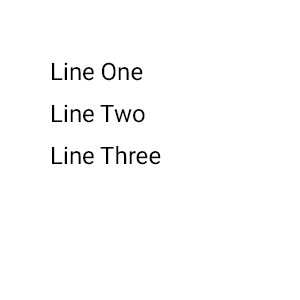
<style>
.page{position:relative;width:300px;height:300px;background:#ffffff}
.page>*{position:absolute;margin:0}
.t1{font:24px "Roboto-Regular";color:#000000}
</style>
<div class="page">
<p class="t1" style="left:52px;top:62px;width:109px;height:103px">Line One<br>Line Two<br>Line Three</p>
</div>
